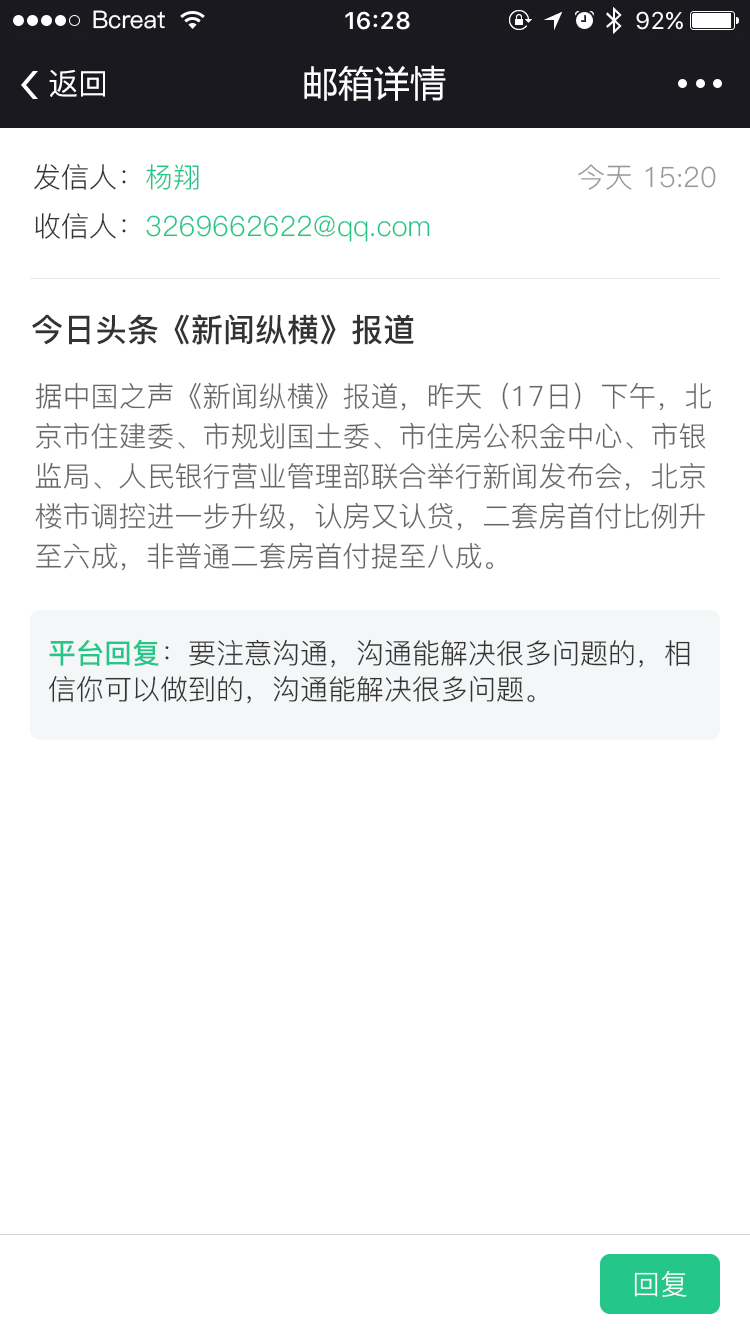
<style>
.page{position:relative;width:750px;height:1334px;background:#ffffff}
.page>*{position:absolute;margin:0}
.t1{font:24px "PingFang-SC-Medium";color:#ffffff}
.t2{font:36px "MicrosoftYaHei";color:#ffffff}
.t3{font:30px "PingFang-SC-Medium";color:#ffffff}
.t4{font:28px "PingFang-SC-Regular";color:#333333}
.t5{font:28px "PingFang-SC-Regular";color:#24c789}
.t6{font:28px "PingFang-SC-Regular";color:#999999}
.t7{font:32px "PingFang-SC-Bold";color:#333333}
.t8{font:28px/40px "PingFang-SC-Regular";color:#666666}
.t9{font:28px/36px "PingFang-SC-Regular";color:#333333}
.t10{font:28px/36px "PingFang-SC-Bold";color:#24c789}
.t11{font:28px "PingFang-SC-Regular";color:#ffffff}
</style>
<div class="page">
<p class="t1" style="left:93px;top:10px;width:72px;height:19px">Bcreat</p>
<p class="t2" style="left:304px;top:65px;width:142px;height:36px">邮箱详情</p>
<p class="t3" style="left:49px;top:69px;width:56px;height:28px">返回</p>
<p class="t4" style="left:34px;top:163px;width:165px;height:27px">发信人：<span class="t5">杨翔</span></p>
<p class="t6" style="left:578px;top:164px;width:138px;height:26px">今天 15:20</p>
<p class="t5" style="left:35px;top:213px;width:395px;height:29px"><span class="t4">收信人：</span>3269662622@qq.com</p>
<p class="t7" style="left:32px;top:314px;width:382px;height:31px">今日头条《新闻纵横》报道</p>
<p class="t8" style="left:35px;top:382px;width:677px;height:189px">据中国之声《新闻纵横》报道，昨天（17日）下午，北京市住建委、市规划国土委、市住房公积金中心、市银监局、人民银行营业管理部联合举行新闻发布会，北京楼市调控进一步升级，认房又认贷，二套房首付比例升至六成，非普通二套房首付提至八成。</p>
<p class="t9" style="left:49px;top:639px;width:641px;height:65px"><span class="t10">平台回复</span>：要注意沟通，沟通能解决很多问题的，相<br>信你可以做到的，沟通能解决很多问题。</p>
<p class="t11" style="left:634px;top:1271px;width:53px;height:26px">回复</p>
</div>
